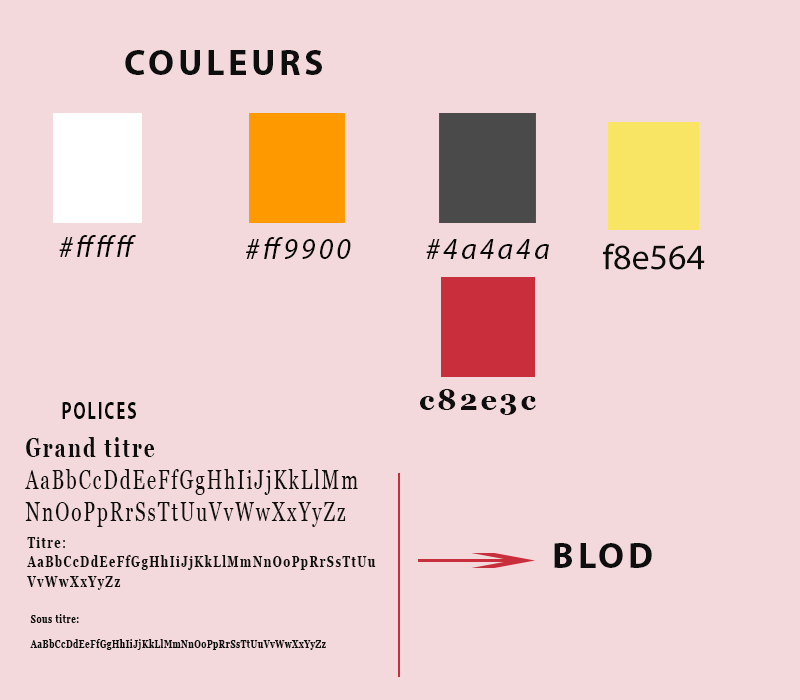
<style>
.page{position:relative;width:800px;height:700px;background:#f3d9db}
.page>*{position:absolute;margin:0}
.t1{font:36px "MyriadPro-Bold";letter-spacing:0.1em;color:#0e0e0e}
.t2{font:30px "MyriadPro-It";letter-spacing:0.1em;color:#070707}
.t3{font:36px "MyriadPro-Regular";color:#0c0c0b}
.t4{font:28.8px "Georgia-Bold";letter-spacing:0.1em;color:#0e0e0e}
.t5{font:24px "MyriadPro-Bold";letter-spacing:0.1em;color:#070707;scale:0.72 1}
.t6{font:26.7px "Georgia";letter-spacing:0.1em;color:#0e0e0e;scale:0.72 1}
.t7{font:26.7px "Georgia-Bold";letter-spacing:0.1em;color:#0e0e0e;scale:0.72 1}
.t8{font:16px "Georgia-Bold";letter-spacing:0.1em;color:#0e0e0e;scale:0.72 1}
.t9{font:10.7px "Georgia-Bold";letter-spacing:0.1em;color:#0e0e0e;scale:0.72 1}
</style>
<div class="page">
<p class="t1" style="left:125px;top:50px;width:197px;height:25px">COULEURS</p>
<p class="t2" style="left:59px;top:235px;width:77px;height:22px">#ffffff</p>
<p class="t2" style="left:246px;top:237px;width:105px;height:22px">#ff9900</p>
<p class="t2" style="left:426px;top:239px;width:123px;height:20px">#4a4a4a</p>
<p class="t3" style="left:603px;top:243px;width:102px;height:27px">f8e564</p>
<p class="t4" style="left:420px;top:389px;width:116px;height:26px">c82e3c</p>
<p class="t5" style="left:62px;top:402px;width:74px;height:17px">POLICES</p>
<p class="t6" style="left:25px;top:437px;width:333px;height:90px"><span class="t7">Grand titre<br></span>AaBbCcDdEeFfGgHhIiJjKkLlMm<br>NnOoPpRrSsTtUuVvWwXxYyZz</p>
<p class="t8" style="left:27px;top:537px;width:349px;height:53px">Titre:<br>AaBbCcDdEeFfGgHhIiJjKkLlMmNnOoPpRrSsTtUu<br>VvWwXxYyZz</p>
<p class="t1" style="left:554px;top:543px;width:98px;height:25px">BLOD</p>
<p class="t9" style="left:30px;top:614px;width:296px;height:36px">Sous titre:<br><br>AaBbCcDdEeFfGgHhIiJjKkLlMmNnOoPpRrSsTtUuVvWwXxYyZz</p>
</div>
